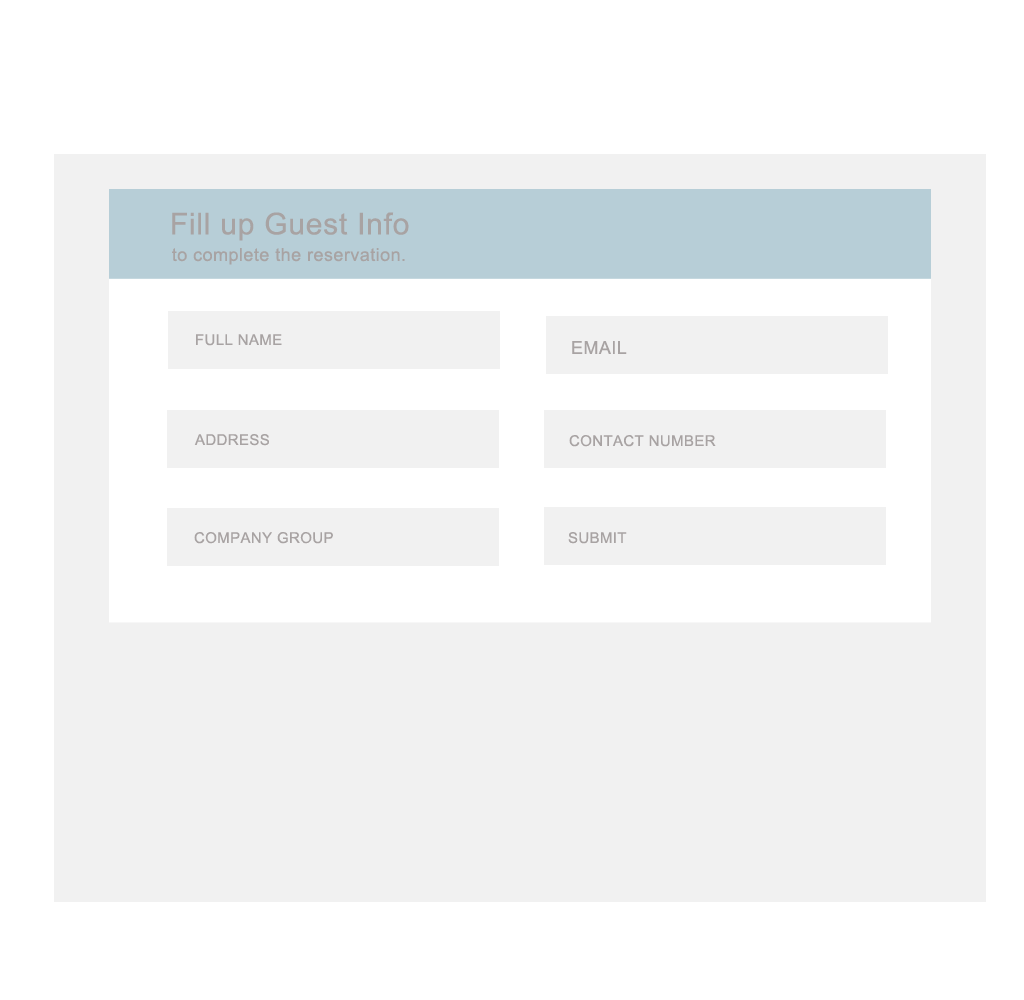
<style>
.page{position:relative;width:1024px;height:1000px;background:#ffffff}
.page>*{position:absolute;margin:0}
.t1{font:30px "ArialMT";letter-spacing:0.025em;color:#a8a3a3}
.t2{font:18px "ArialMT";letter-spacing:0.025em;color:#a8a3a3}
.t3{font:15px "ArialMT";letter-spacing:0.025em;color:#a8a3a3}
</style>
<div class="page">
<p class="t1" style="left:172px;top:212px;width:237px;height:29px">Fill up Guest Info</p>
<p class="t2" style="left:172px;top:248px;width:233px;height:17px">to complete the reservation.</p>
<p class="t3" style="left:196px;top:334px;width:86px;height:12px">FULL NAME</p>
<p class="t2" style="left:572px;top:341px;width:55px;height:13px">EMAIL</p>
<p class="t3" style="left:194px;top:434px;width:75px;height:12px">ADDRESS</p>
<p class="t3" style="left:569px;top:435px;width:147px;height:12px">CONTACT NUMBER</p>
<p class="t3" style="left:194px;top:532px;width:139px;height:12px">COMPANY GROUP</p>
<p class="t3" style="left:568px;top:532px;width:59px;height:12px">SUBMIT</p>
</div>
